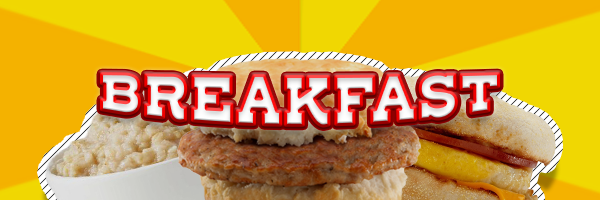
<style>
.page{position:relative;width:600px;height:200px;background:#f4b200}
.page>*{position:absolute;margin:0}
.t1{font:50px "HendersonSlabBasicBlack"}
</style>
<div class="page">
<p class="t1" style="left:101px;top:73px;width:398px;height:53px">BREAKFAST</p>
</div>
